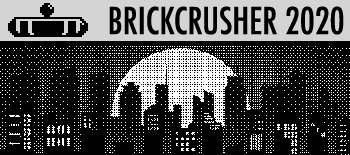
<style>
.page{position:relative;width:350px;height:155px;background:#000000}
.page>*{position:absolute;margin:0}
.t1{font:36px "Futura-CondensedMedium";color:#000000}
</style>
<div class="page">
<p class="t1" style="left:109px;top:6px;width:235px;height:29px">BRICKCRUSHER 2020</p>
</div>
